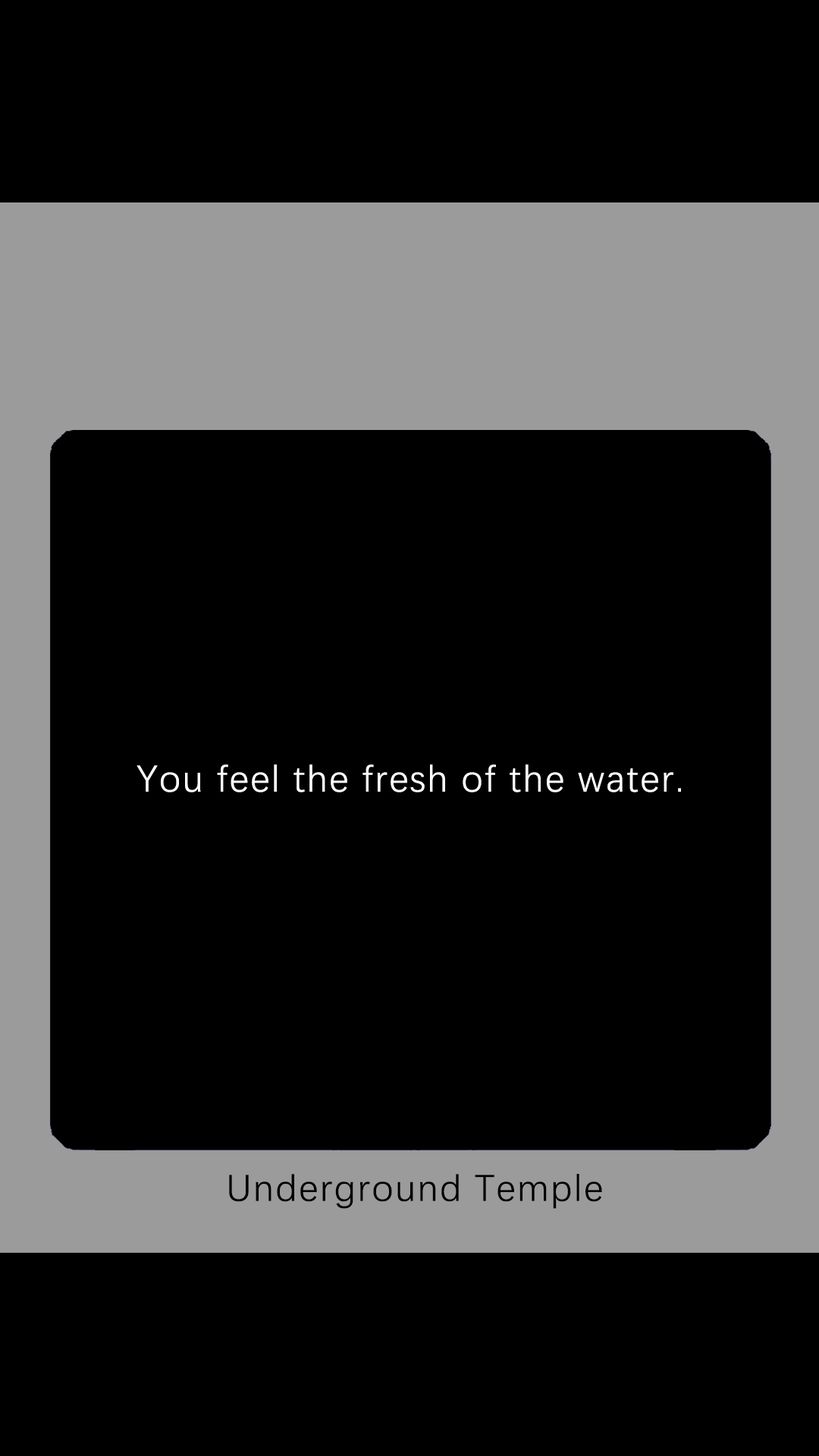
<style>
.page{position:relative;width:819px;height:1456px;background:#000000}
.page>*{position:absolute;margin:0}
.t1{font:37.9px "DengXian-Regular";letter-spacing:0.04em;color:#ffffff}
.t2{font:37.9px "DengXian-Regular";letter-spacing:0.04em;color:#000000}
</style>
<div class="page">
<p class="t1" style="left:136px;top:764px;width:545px;height:28px">You feel the fresh of the water.</p>
<p class="t2" style="left:229px;top:1174px;width:373px;height:35px">Underground Temple</p>
</div>
